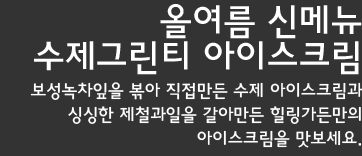
<style>
.page{position:relative;width:362px;height:156px;background:#333333}
.page>*{position:absolute;margin:0}
.t1{font:18px/24px "HaanYGodic23";letter-spacing:-0.04em;color:#ffffff}
.t2{font:37px/36px "HaanYGodic23";letter-spacing:-0.04em;color:#ffffff}
</style>
<div class="page">
<p class="t1" style="left:30px;top:4px;width:333px;height:144px;text-align:right"><span class="t2">올여름 신메뉴<br>수제그린티 아이스크림<br></span>보성녹차잎을 볶아 직접만든 수제 아이스크림과<br>싱싱한 제철과일을 갈아만든 힐링가든만의 아이스크림을 맛보세요.</p>
</div>
